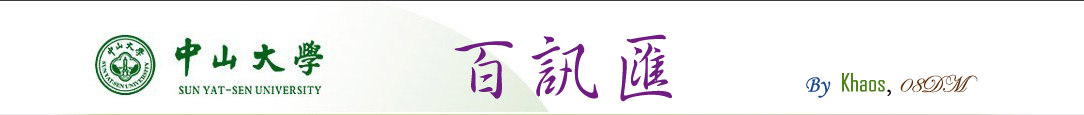
<style>
.page{position:relative;width:1084px;height:115px;background:#ffffff}
.page>*{position:absolute;margin:0}
.t1{font:24px "AgencyFB-Reg";color:#4d821d}
.t2{font:80px "¾­µä·±ÐÐÊé Regular";color:#701d82}
.t3{font:24px "MonotypeCorsiva";color:#1d4a82}
.t4{font:24px "¾­µä·±ÐÐÊé Regular";color:#111011}
.t5{font:24px "EdwardianScriptITC";color:#592804}
</style>
<div class="page">
<p class="t1" style="left:454px;top:34px;width:524px;height:68px"><span class="t2">百讯汇   </span><span class="t3">By </span>Khaos<span class="t4">,</span><span class="t5">08DM</span></p>
</div>
